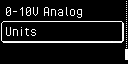
<style>
.page{position:relative;width:128px;height:64px;background:#000000}
.page>*{position:absolute;margin:0}
.t1{font:16px "PixelOperator";color:#ffffff}
</style>
<div class="page">
<p class="t1" style="left:5px;top:7px;width:77px;height:11px">0-10V Analog</p>
<p class="t1" style="left:5px;top:27px;width:31px;height:9px">Units</p>
</div>
